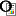
<style>
.page{position:relative;width:16px;height:16px;background:#ffffff}
.page>*{position:absolute;margin:0}
.t1{font:15.9px "Garamond";color:#000000;font-weight:bold}
</style>
<div class="page">
<p class="t1" style="left:0px;top:0px;width:12px;height:12px">O</p>
<p class="t1" style="left:0px;top:0px;width:12px;height:12px">O</p>
<p class="t1" style="left:0px;top:0px;width:12px;height:12px">O</p>
</div>
